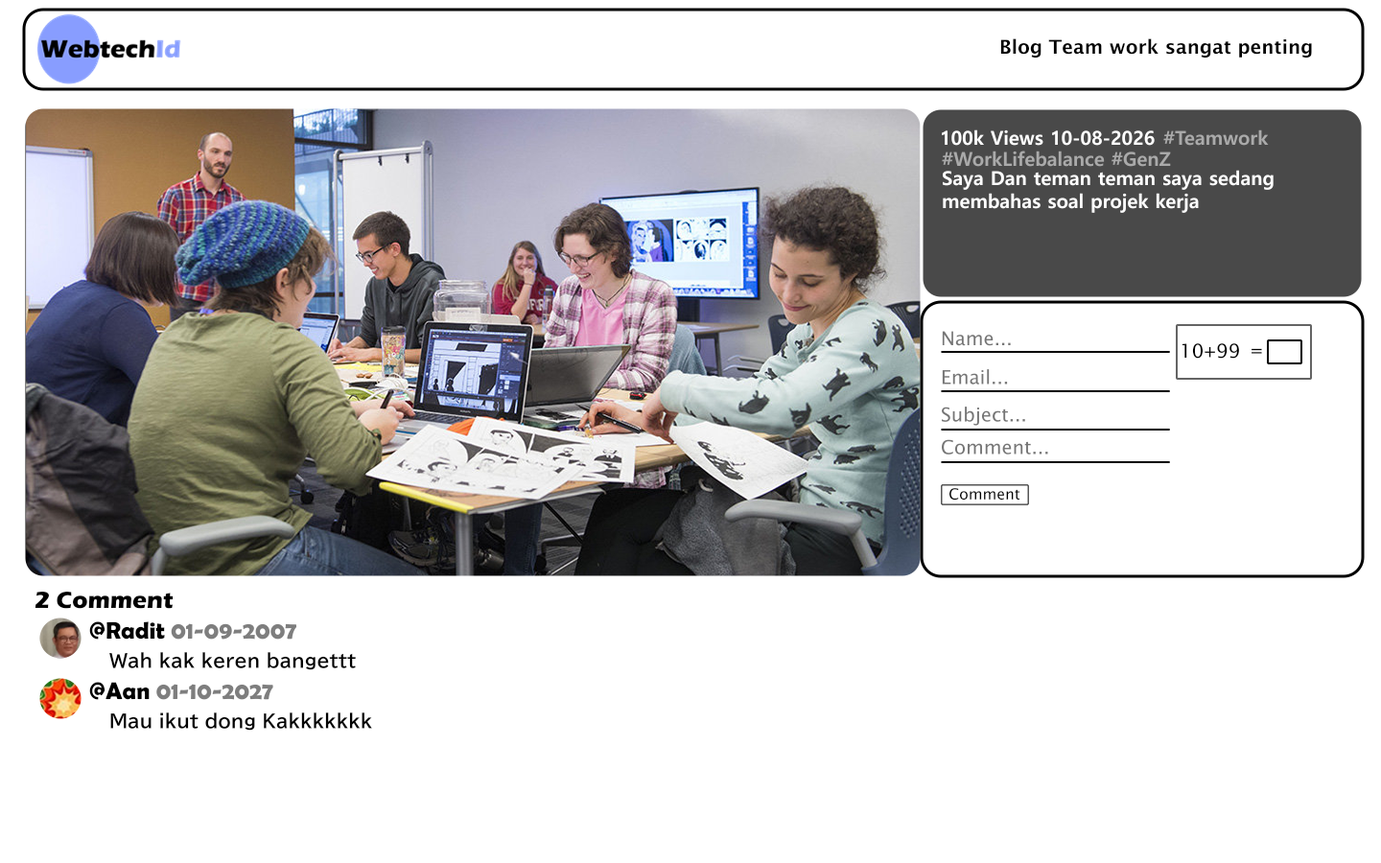
<style>
.page{position:relative;width:1381px;height:863px;background:#ffffff}
.page>*{position:absolute;margin:0}
.t1{font:19.2px "LucidaSans-Demi";color:#000000}
.t2{font:19.2px "MalgunGothic-SemiBold";color:#ffffff}
.t3{font:19.2px "MalgunGothicBold";color:#ffffff}
.t4{font:19.2px "MalgunGothicBold";color:#aaaaaa}
.t5{font:19.2px "LucidaSans";color:#757575}
.t6{font:19.2px "LucidaSans";color:#000000}
.t7{font:15.1px "LucidaSans";color:#000000}
.t8{font:24px "ErasBoldITC-Bold";color:#000000}
.t9{font:24px "BerlinSansFBDemi-Bold";color:#7e7e7e}
.t10{font:24px "BerlinSansFBDemi-Bold";color:#000000}
.t11{font:18.2px "BIZUDPGothic-Bold";color:#000000}
</style>
<div class="page">
<p class="t1" style="left:1000px;top:38px;width:312px;height:21px">Blog Team work sangat penting</p>
<p class="t2" style="left:941px;top:129px;width:104px;height:18px">100k Views</p>
<p class="t3" style="left:1051px;top:130px;width:105px;height:17px">10-08-2026</p>
<p class="t4" style="left:1163px;top:129px;width:107px;height:18px">#Teamwork</p>
<p class="t4" style="left:941px;top:151px;width:231px;height:17px">#WorkLifebalance #GenZ</p>
<p class="t3" style="left:942px;top:170px;width:333px;height:44px">Saya Dan teman teman saya sedang <br>membahas soal projek kerja</p>
<p class="t5" style="left:941px;top:331px;width:71px;height:16px">Name...</p>
<p class="t6" style="left:1182px;top:343px;width:57px;height:16px">10+99</p>
<p class="t6" style="left:1252px;top:348px;width:10px;height:6px">=</p>
<p class="t5" style="left:941px;top:369px;width:68px;height:17px">Email...</p>
<p class="t5" style="left:940px;top:407px;width:86px;height:20px">Subject...</p>
<p class="t5" style="left:941px;top:439px;width:108px;height:17px">Comment...</p>
<p class="t7" style="left:950px;top:488px;width:71px;height:13px">Comment</p>
<p class="t8" style="left:35px;top:592px;width:139px;height:17px">2 Comment</p>
<p class="t9" style="left:88px;top:622px;width:210px;height:19px"><span class="t10">@Radit </span>01-09-2007</p>
<p class="t11" style="left:109px;top:652px;width:247px;height:18px">Wah kak keren bangettt</p>
<p class="t9" style="left:88px;top:682px;width:186px;height:19px"><span class="t10">@Aan </span>01-10-2027</p>
<p class="t11" style="left:110px;top:713px;width:262px;height:18px">Mau ikut dong Kakkkkkkk</p>
</div>
